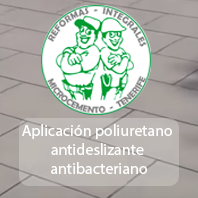
<style>
.page{position:relative;width:198px;height:198px}
.page>*{position:absolute;margin:0}
.t1{font:16px "MyriadPro-Regular";color:#ffffff}
</style>
<div class="page">
<p class="t1" style="left:22px;top:124px;width:150px;height:50px;text-align:center">Aplicación poliuretano <br>antideslizante <br>antibacteriano</p>
</div>
